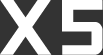
<style>
.page{position:relative;width:103px;height:55px;background:#333333}
.page>*{position:absolute;margin:0}
.t1{font:70px "HelloFont-WenYiHei";color:#ffffff;font-weight:bold}
</style>
<div class="page">
<p class="t1" style="left:0px;top:0px;width:103px;height:55px">X5</p>
</div>
